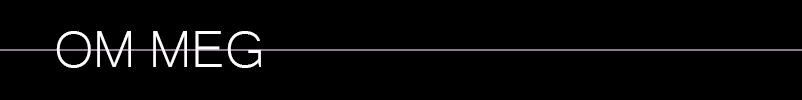
<style>
.page{position:relative;width:802px;height:100px;background:#000000}
.page>*{position:absolute;margin:0}
.t1{font:66.7px "Microsoft-Yi-Baiti";color:#ffffff}
</style>
<div class="page">
<p class="t1" style="left:56px;top:31px;width:205px;height:37px">OMMEG</p>
</div>
